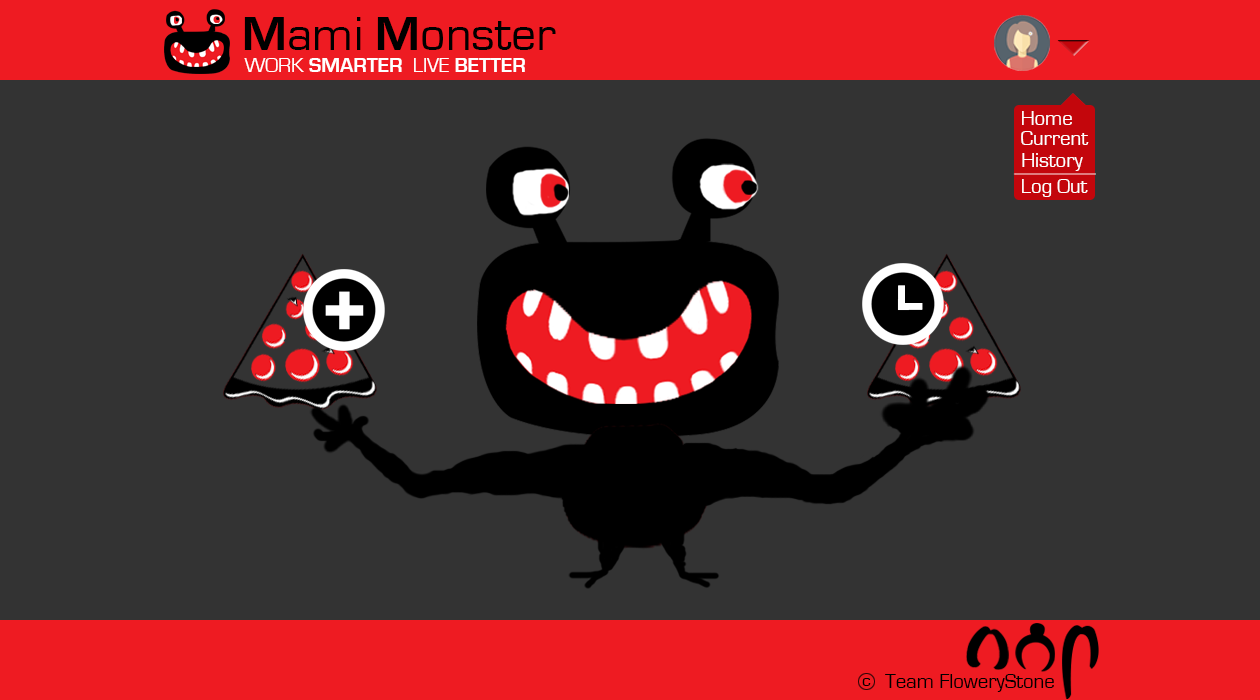
<style>
.page{position:relative;width:1260px;height:700px;background:#333333}
.page>*{position:absolute;margin:0}
.t1{font:50px "EurostileRegular";color:#000000}
.t2{font:50px "EurostileBold";color:#000000}
.t3{font:20.8px "EurostileBold";color:#ffffff}
.t4{font:20.8px "EurostileRegular";color:#ffffff}
.t5{font:17.7px "EurostileRegular";color:#000000}
.t6{font:20.8px "EurostileRegular";color:#000000}
</style>
<div class="page">
<p class="t1" style="left:244px;top:17px;width:312px;height:33px"><span class="t2">M</span>ami <span class="t2">M</span>onster</p>
<p class="t3" style="left:244px;top:58px;width:281px;height:14px"><span class="t4">WORK </span>SMARTER<span class="t4">  LIVE </span>BETTER</p>
<p class="t4" style="left:1022px;top:111px;width:50px;height:14px">Home</p>
<p class="t4" style="left:1021px;top:131px;width:68px;height:14px">Current</p>
<p class="t4" style="left:1022px;top:153px;width:61px;height:18px">History</p>
<p class="t4" style="left:1022px;top:179px;width:66px;height:18px">Log Out</p>
<p class="t5" style="left:862px;top:678px;width:9px;height:8px">c</p>
<p class="t6" style="left:885px;top:674px;width:169px;height:18px">Team FloweryStone</p>
</div>
